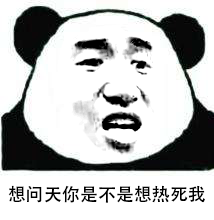
<style>
.page{position:relative;width:214px;height:220px;background:#ffffff}
.page>*{position:absolute;margin:0}
.t1{font:18px "AdobeHeitiStd-Regular";color:#000000}
</style>
<div class="page">
<p class="t1" style="left:8px;top:185px;width:197px;height:18px">想问天你是不是想热死我</p>
</div>
